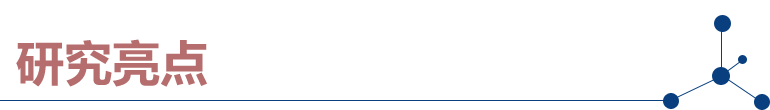
<style>
.page{position:relative;width:770px;height:110px;background:#ffffff}
.page>*{position:absolute;margin:0}
.t1{font:48px "MicrosoftYaHei-Bold";color:#b66d6d}
</style>
<div class="page">
<p class="t1" style="left:16px;top:39px;width:191px;height:48px">研究亮点</p>
</div>
